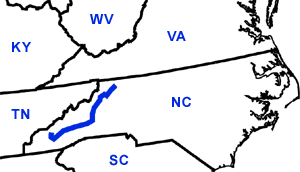
<style>
.page{position:relative;width:300px;height:172px;background:#ffffff}
.page>*{position:absolute;margin:0}
.t1{font:14px "Arial-BoldMT";letter-spacing:0.05em;color:#002adf}
</style>
<div class="page">
<p class="t1" style="left:90px;top:14px;width:24px;height:10px">WV</p>
<p class="t1" style="left:167px;top:31px;width:19px;height:10px">VA</p>
<p class="t1" style="left:12px;top:42px;width:19px;height:10px">KY</p>
<p class="t1" style="left:172px;top:96px;width:19px;height:11px">NC</p>
<p class="t1" style="left:11px;top:109px;width:19px;height:10px">TN</p>
<p class="t1" style="left:109px;top:154px;width:20px;height:12px">SC</p>
</div>
